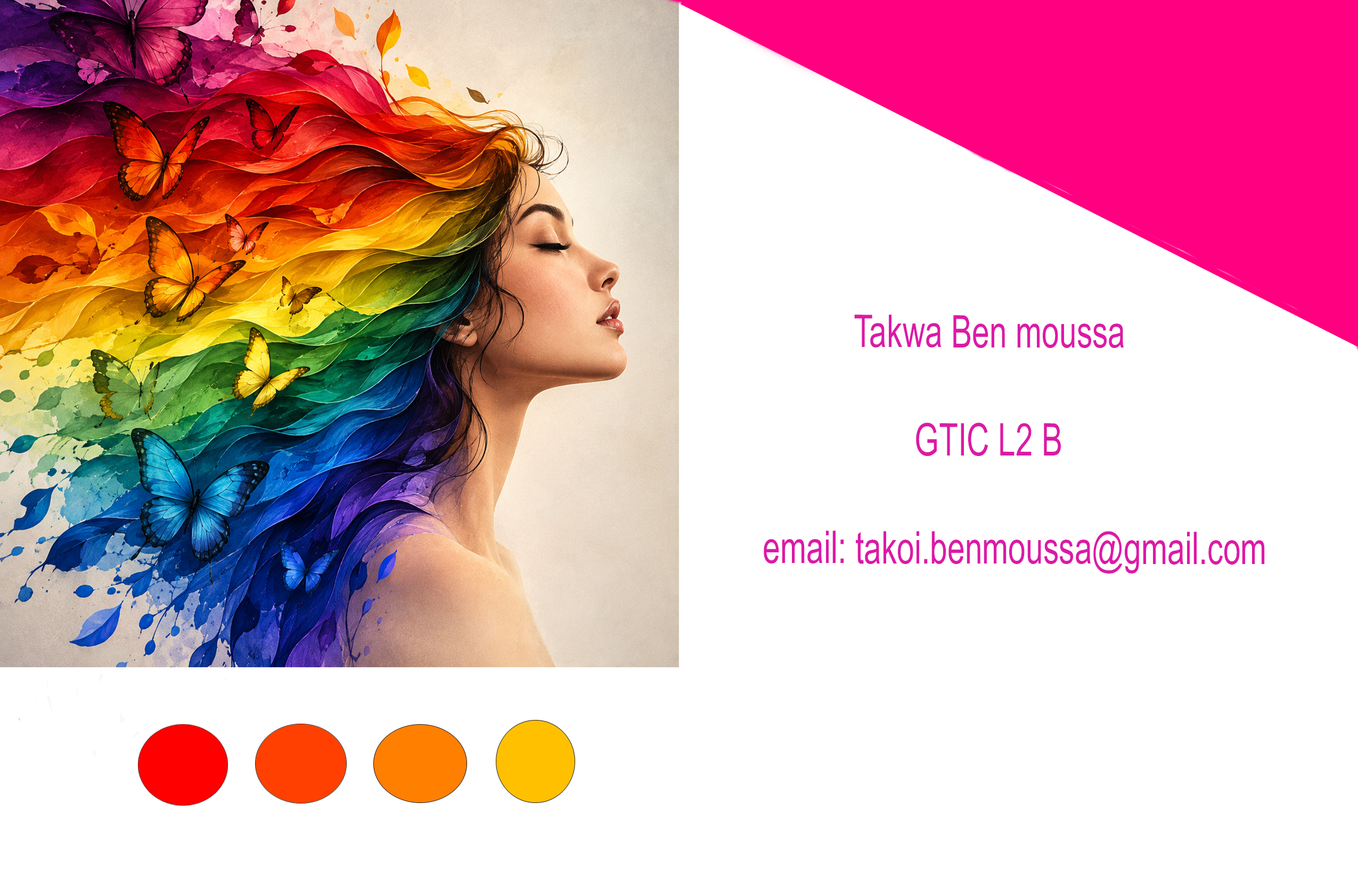
<style>
.page{position:relative;width:1358px;height:878px;background:#ffffff}
.page>*{position:absolute;margin:0}
.t1{font:45.1px "ArialMT";color:#dc19a7;scale:0.69 1}
.t2{font:45.1px "ArialMT";color:#dc19c3;scale:0.69 1}
</style>
<div class="page">
<p class="t1" style="left:763px;top:315px;width:501px;height:259px"><span class="t2"><br><br><br></span>Takwa Ben moussa<br><br>       GTIC L2 B<br><br>                                     email: takoi.benmoussa@gmail.com</p>
</div>
